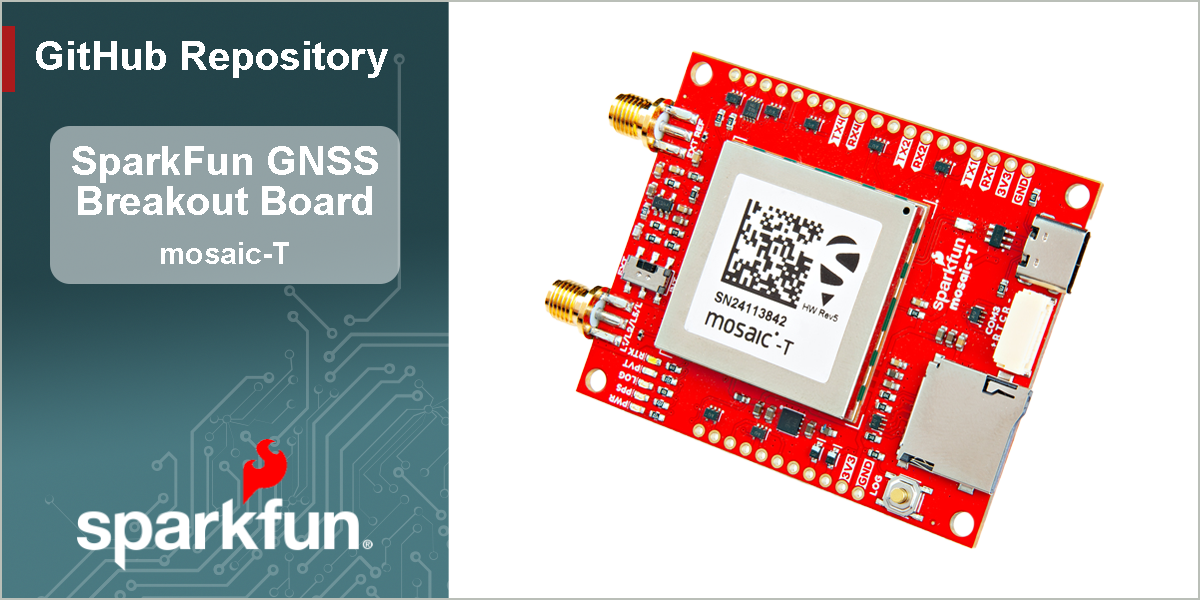
<style>
.page{position:relative;width:1200px;height:600px;background:#ffffff}
.page>*{position:absolute;margin:0}
.t1{font:40px "Arial-BoldMT";color:#ffffff}
.t2{font:30px "Arial-BoldMT";color:#ffffff}
</style>
<div class="page">
<p class="t1" style="left:36px;top:41px;width:352px;height:37px">GitHub Repository</p>
<p class="t1" style="left:72px;top:146px;width:306px;height:69px;text-align:center">SparkFun GNSS<br>Breakout Board</p>
<p class="t2" style="left:161px;top:242px;width:128px;height:22px">mosaic-T</p>
</div>
